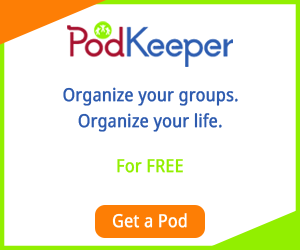
<style>
.page{position:relative;width:300px;height:250px;background:#ffffff}
.page>*{position:absolute;margin:0}
.t1{font:18px "NotoSans";color:#2e5baf;font-weight:bold;scale:0.88 1}
.t2{font:18px "NotoSans";color:#92ef00;font-weight:bold;scale:0.88 1}
.t3{font:18px "NotoSans";color:#feffff;font-weight:bold;scale:0.88 1}
</style>
<div class="page">
<p class="t1" style="left:63px;top:87px;width:175px;height:19px">Organize your groups.</p>
<p class="t1" style="left:78px;top:113px;width:144px;height:19px">Organize your life.</p>
<p class="t2" style="left:117px;top:159px;width:66px;height:14px">For FREE</p>
<p class="t3" style="left:112px;top:213px;width:75px;height:15px">Get a Pod</p>
</div>
